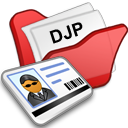
<style>
.page{position:relative;width:128px;height:128px;background:#ffffff}
.page>*{position:absolute;margin:0}
.t1{font:18px "Arial-BoldMT";color:#010101}
</style>
<div class="page">
<p class="t1" style="left:49px;top:22px;width:34px;height:22px;rotate:-18deg">DJP</p>
</div>
